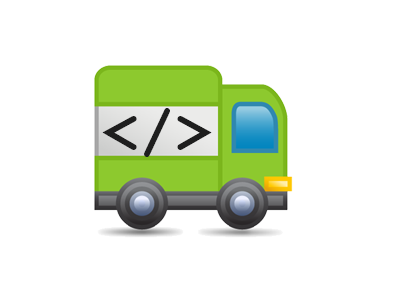
<style>
.page{position:relative;width:400px;height:300px;background:#ffffff}
.page>*{position:absolute;margin:0}
.t1{font:60px "CourierNewPS-BoldMT";color:#1e1e1e}
</style>
<div class="page">
<p class="t1" style="left:102px;top:108px;width:110px;height:49px">&lt;/&gt;</p>
</div>
